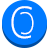
<style>
.page{position:relative;width:48px;height:48px;background:#007aff}
.page>*{position:absolute;margin:0}
.t1{font:44.1px "OpenSans-Light";color:#ffffff;scale:0.89 1}
.t2{font:30.5px "OpenSans-Light";color:#ffffff;scale:0.82 1}
</style>
<div class="page">
<p class="t1" style="left:11px;top:6px;width:21px;height:33px">C</p>
<p class="t2" style="left:20px;top:12px;width:14px;height:23px;rotate:180deg">C</p>
</div>
